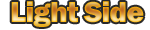
<style>
.page{position:relative;width:150px;height:30px;background:#ffffff}
.page>*{position:absolute;margin:0}
.t1{font:30px "FranklinGothic-Heavy";letter-spacing:-0.025em}
</style>
<div class="page">
<p class="t1" style="left:11px;top:1px;width:133px;height:26px">Light Side</p>
</div>
